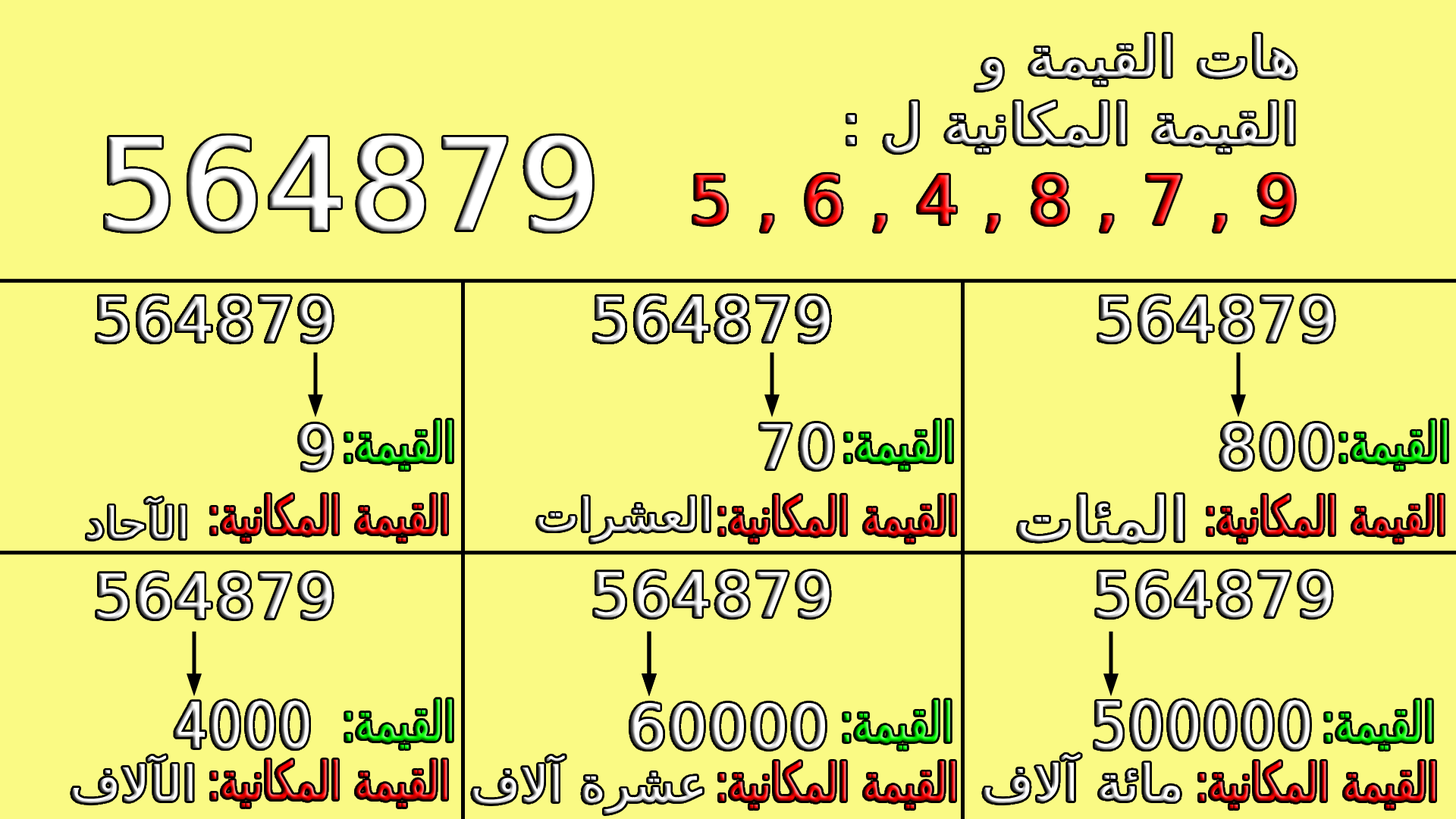
<style>
.page{position:relative;width:1456px;height:819px;background:#fafa84}
.page>*{position:absolute;margin:0}
.t1{font:56.1px "DejaVuSans";font-weight:bold}
.t2{font:66.7px "DejaVuSans";font-weight:bold}
.t3{font:127.1px "DejaVuSans";color:#ffffff;font-weight:bold}
.t4{font:61.2px "DejaVuSans";font-weight:bold}
.t5{font:54.6px "DejaVuSans";font-weight:bold;scale:0.69 1}
.t6{font:43.5px "DejaVuSans";font-weight:bold}
.t7{font:52.1px "DejaVuSans";font-weight:bold;scale:0.7 1}
.t8{font:45.5px "DejaVuSans";font-weight:bold}
.t9{font:60.6px "DejaVuSans";font-weight:bold}
.t10{font:63.1px "DejaVuSans";font-weight:bold;scale:0.83 1}
.t11{font:64.9px "DejaVuSans";font-weight:bold;scale:0.86 1}
.t12{font:48.5px "DejaVuSans";font-weight:bold}
.t13{font:49.4px "DejaVuSans";font-weight:bold;scale:0.97 1}
.t14{font:50px "DejaVuSans";font-weight:bold}
</style>
<div class="page">
<p class="t1" style="left:693px;top:33px;width:603px;height:199px;text-align:right">هات القيمة و<br>: القيمة المكانية ل<br><span class="t2">5 , 6 , 4 , 8 , 7 , 9</span></p>
<p class="t3" style="left:105px;top:135px;width:488px;height:97px">564879</p>
<p class="t4" style="left:97px;top:296px;width:235px;height:47px">564879</p>
<p class="t4" style="left:97px;top:296px;width:235px;height:47px">564879</p>
<p class="t4" style="left:97px;top:296px;width:235px;height:47px">564879</p>
<p class="t4" style="left:595px;top:296px;width:235px;height:47px">564879</p>
<p class="t4" style="left:595px;top:296px;width:235px;height:47px">564879</p>
<p class="t4" style="left:595px;top:296px;width:235px;height:47px">564879</p>
<p class="t4" style="left:595px;top:296px;width:235px;height:47px">564879</p>
<p class="t4" style="left:595px;top:296px;width:235px;height:47px">564879</p>
<p class="t4" style="left:595px;top:296px;width:235px;height:47px">564879</p>
<p class="t4" style="left:1099px;top:296px;width:235px;height:47px">564879</p>
<p class="t4" style="left:300px;top:424px;width:32px;height:47px">9</p>
<p class="t5" style="left:346px;top:420px;width:106px;height:50px">:القيمة</p>
<p class="t5" style="left:346px;top:420px;width:106px;height:50px">:القيمة</p>
<p class="t4" style="left:760px;top:423px;width:73px;height:47px">70</p>
<p class="t5" style="left:846px;top:420px;width:106px;height:50px">:القيمة</p>
<p class="t5" style="left:846px;top:420px;width:106px;height:50px">:القيمة</p>
<p class="t4" style="left:1221px;top:423px;width:112px;height:47px">800</p>
<p class="t5" style="left:1341px;top:420px;width:106px;height:50px">:القيمة</p>
<p class="t6" style="left:86px;top:497px;width:100px;height:43px">الآحاد</p>
<p class="t7" style="left:211px;top:494px;width:236px;height:47px">:القيمة المكانية</p>
<p class="t8" style="left:538px;top:496px;width:171px;height:46px">العشرات</p>
<p class="t7" style="left:719px;top:494px;width:236px;height:48px">:القيمة المكانية</p>
<p class="t9" style="left:1018px;top:494px;width:165px;height:48px">المئات</p>
<p class="t7" style="left:1207px;top:494px;width:237px;height:48px">:القيمة المكانية</p>
<p class="t4" style="left:97px;top:573px;width:235px;height:47px">564879</p>
<p class="t4" style="left:595px;top:571px;width:235px;height:47px">564879</p>
<p class="t4" style="left:1097px;top:571px;width:235px;height:47px">564879</p>
<p class="t10" style="left:175px;top:701px;width:134px;height:48px">4000</p>
<p class="t5" style="left:346px;top:699px;width:106px;height:50px">:القيمة</p>
<p class="t5" style="left:844px;top:700px;width:106px;height:50px">:القيمة</p>
<p class="t11" style="left:1094px;top:700px;width:216px;height:50px">500000</p>
<p class="t5" style="left:1326px;top:700px;width:106px;height:50px">:القيمة</p>
<p class="t4" style="left:630px;top:703px;width:196px;height:47px">60000</p>
<p class="t12" style="left:72px;top:755px;width:121px;height:48px">الآلاف</p>
<p class="t7" style="left:211px;top:759px;width:236px;height:48px">:القيمة المكانية</p>
<p class="t13" style="left:472px;top:755px;width:231px;height:59px">عشرة آلاف</p>
<p class="t7" style="left:719px;top:761px;width:236px;height:47px">:القيمة المكانية</p>
<p class="t14" style="left:984px;top:754px;width:196px;height:49px">مائة آلاف</p>
<p class="t7" style="left:1199px;top:761px;width:237px;height:47px">:القيمة المكانية</p>
</div>
